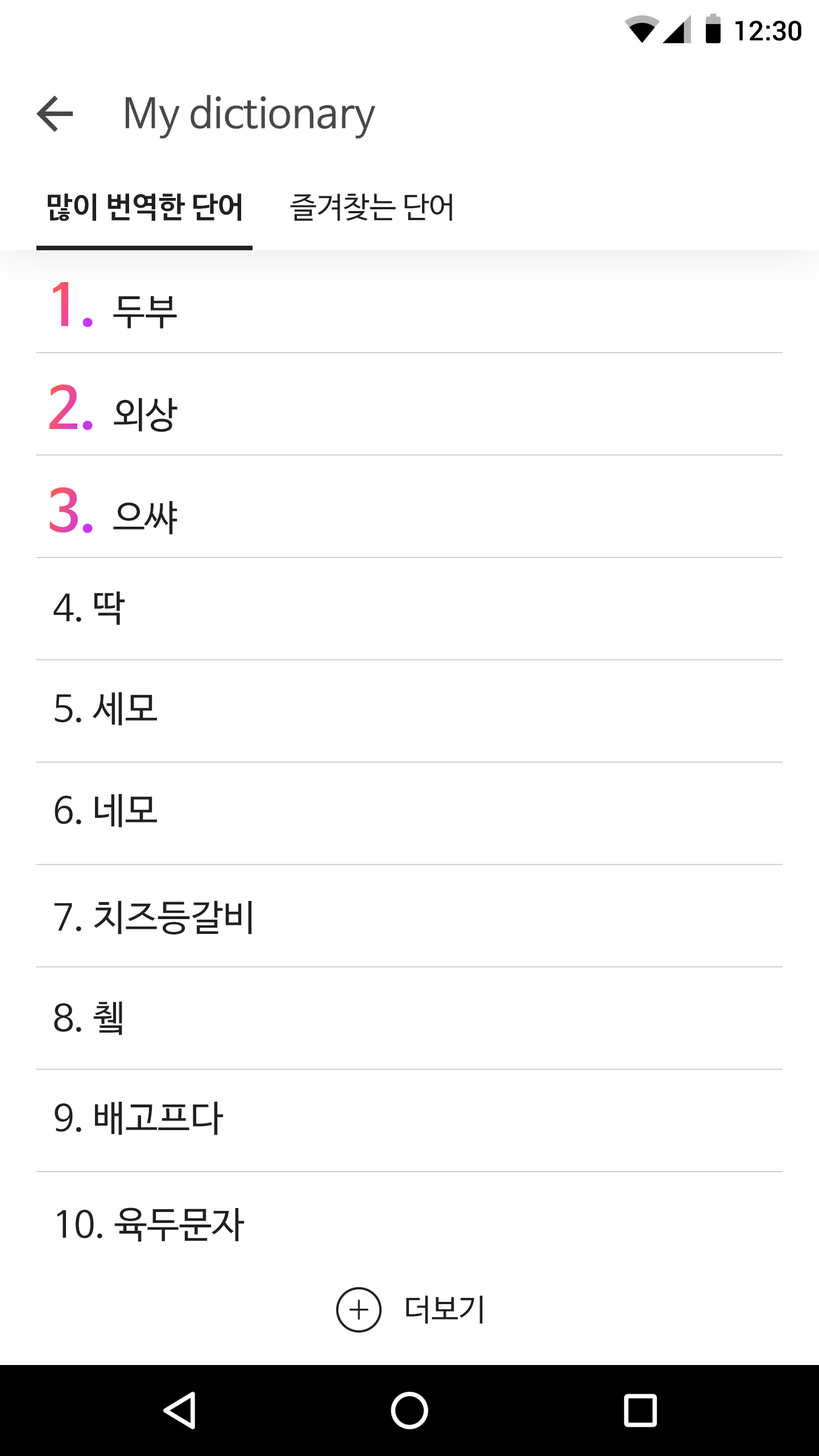
<style>
.page{position:relative;width:819px;height:1456px;background:#ffffff}
.page>*{position:absolute;margin:0}
.t1{font:27.3px "Roboto-Medium";color:#000000}
.t2{font:40.9px "NanumBarunGothic";color:#484848}
.t3{font:29.6px "NanumBarunGothicBold";color:#202020}
.t4{font:29.6px "NanumBarunGothic";color:#202020}
.t5{font:56.9px "NanumBarunGothicBold"}
.t6{font:36.4px "NanumBarunGothic";color:#202020}
.t7{font:40.9px "NanumBarunGothicLight";color:#202020}
.t8{font:30.7px "NanumBarunGothic";color:#202020}
</style>
<div class="page">
<p class="t1" style="left:735px;top:20px;width:66px;height:21px">12:30</p>
<p class="t2" style="left:126px;top:95px;width:249px;height:44px">My dictionary</p>
<p class="t3" style="left:48px;top:193px;width:193px;height:28px">많이 번역한 단어</p>
<p class="t4" style="left:290px;top:193px;width:162px;height:28px">즐겨찾는 단어</p>
<p class="t5" style="left:53px;top:282px;width:40px;height:45px">1.</p>
<p class="t6" style="left:113px;top:296px;width:64px;height:33px">두부</p>
<p class="t5" style="left:49px;top:384px;width:44px;height:46px">2.</p>
<p class="t6" style="left:114px;top:398px;width:63px;height:34px">외상</p>
<p class="t5" style="left:49px;top:487px;width:44px;height:46px">3.</p>
<p class="t6" style="left:113px;top:501px;width:64px;height:34px">으쌰</p>
<p class="t6" style="left:53px;top:591px;width:72px;height:34px">4. 딱</p>
<p class="t6" style="left:55px;top:692px;width:102px;height:34px">5. 세모</p>
<p class="t6" style="left:55px;top:794px;width:102px;height:34px">6. 네모</p>
<p class="t6" style="left:54px;top:901px;width:198px;height:33px">7. 치즈등갈비</p>
<p class="t6" style="left:54px;top:1002px;width:68px;height:33px">8. 췤</p>
<p class="t6" style="left:55px;top:1102px;width:169px;height:33px">9. 배고프다</p>
<p class="t6" style="left:57px;top:1207px;width:188px;height:35px">10. 육두문자</p>
<p class="t7" style="left:349px;top:1300px;width:20px;height:19px">+</p>
<p class="t8" style="left:406px;top:1296px;width:77px;height:28px">더보기</p>
</div>
